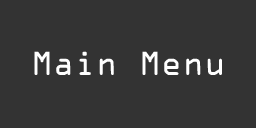
<style>
.page{position:relative;width:256px;height:128px;background:#333333}
.page>*{position:absolute;margin:0}
.t1{font:30px "OCRAStd";color:#ffffff}
</style>
<div class="page">
<p class="t1" style="left:34px;top:51px;width:188px;height:24px">Main Menu</p>
</div>
